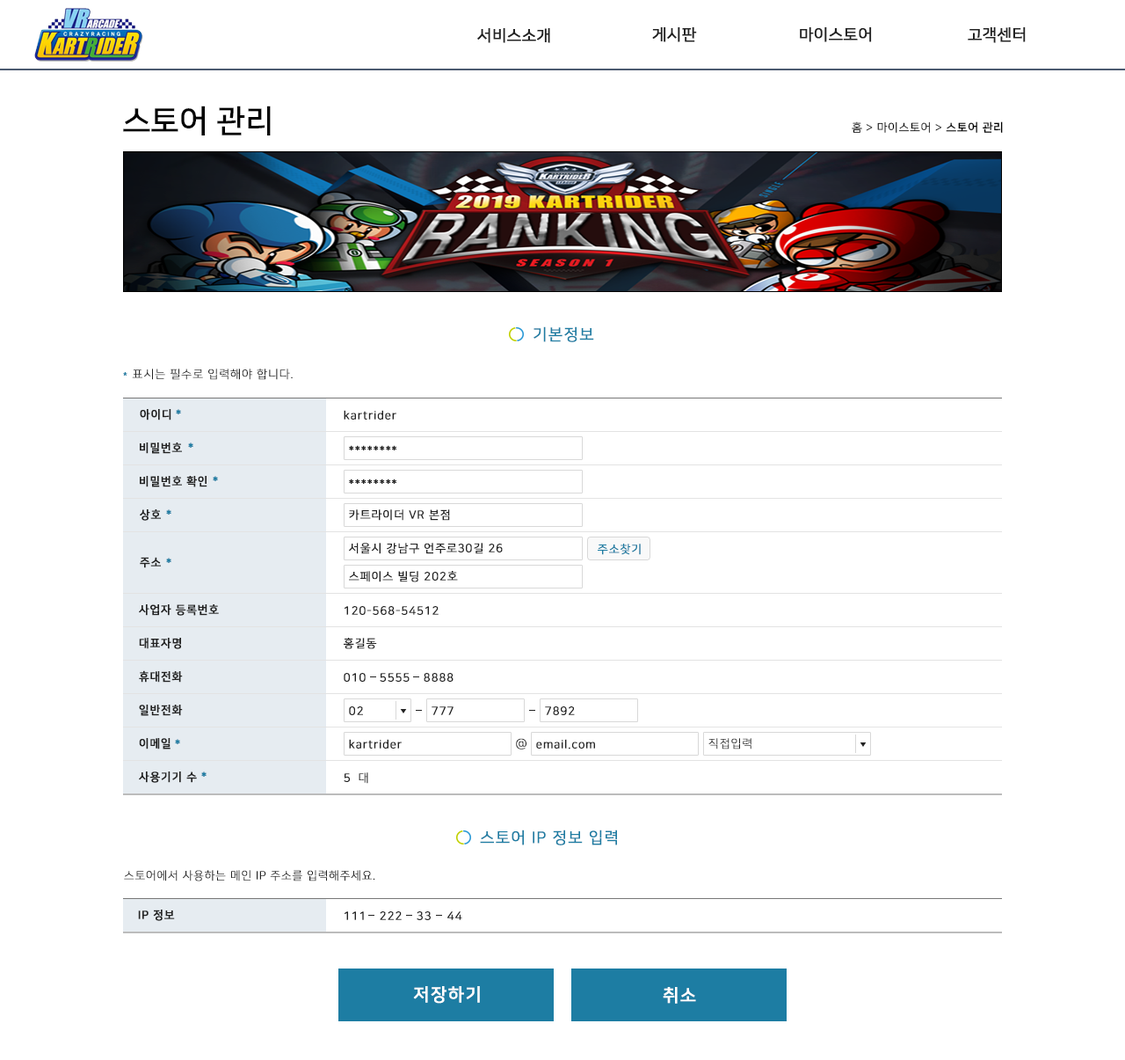
<style>
.page{position:relative;width:1125px;height:1060px;background:#ffffff}
.page>*{position:absolute;margin:0}
.t1{font:15.8px "NanumSquareR";color:#222222;font-weight:bold}
.t2{font:31.7px "NanumSquareB";color:#000000}
.t3{font:11.4px "NanumSquareR";letter-spacing:0.05em;color:#000000}
.t4{font:11.4px "NanumSquareB";letter-spacing:0.05em;color:#000000}
.t5{font:15.8px "NanumSquareR";letter-spacing:0.05em;color:#1d7da3;text-transform:uppercase;font-weight:bold}
.t6{font:11.4px "NotoSansCJKkr-Light";letter-spacing:0.05em;color:#1d7da3;text-transform:uppercase;font-weight:bold}
.t7{font:11.4px "NanumSquareL";letter-spacing:0.05em;color:#222222;text-transform:uppercase;font-weight:bold}
.t8{font:11.4px "NanumSquareB";letter-spacing:0.05em;color:#222222;text-transform:uppercase;font-weight:bold}
.t9{font:11.7px "NanumSquareB";letter-spacing:0.05em;color:#1d7da3;text-transform:uppercase;font-weight:bold}
.t10{font:11.4px "NanumSquareR";letter-spacing:0.05em;color:#222222;font-weight:bold}
.t11{font:11.4px "NanumSquareR";letter-spacing:0.05em;color:#1d7da3;text-transform:uppercase;font-weight:bold}
.t12{font:11.4px "NanumSquareR";letter-spacing:0.05em;color:#222222;text-transform:uppercase;font-weight:bold}
.t13{font:11.4px "NanumSquareL";letter-spacing:0.05em;text-transform:uppercase;font-weight:bold}
.t14{font:17.6px "NanumSquareB";letter-spacing:0.05em;color:#ffffff;font-weight:bold}
</style>
<div class="page">
<p class="t1" style="left:477px;top:27px;width:73px;height:16px">서비스소개</p>
<p class="t1" style="left:652px;top:26px;width:45px;height:16px">게시판</p>
<p class="t1" style="left:800px;top:26px;width:72px;height:16px">마이스토어</p>
<p class="t1" style="left:968px;top:26px;width:58px;height:16px">고객센터</p>
<p class="t2" style="left:123px;top:106px;width:148px;height:29px">스토어 관리</p>
<p class="t3" style="left:852px;top:121px;width:151px;height:12px">홈 &gt; 마이스토어 &gt; <span class="t4">스토어 관리</span></p>
<p class="t5" style="left:534px;top:326px;width:60px;height:16px">기본정보</p>
<p class="t6" style="left:123px;top:372px;width:4px;height:3px">*</p>
<p class="t7" style="left:132px;top:368px;width:161px;height:12px">표시는 필수로 입력해야 합니다.</p>
<p class="t8" style="left:140px;top:409px;width:31px;height:11px">아이디</p>
<p class="t9" style="left:176px;top:409px;width:5px;height:5px">*</p>
<p class="t10" style="left:344px;top:410px;width:53px;height:9px">kartrider</p>
<p class="t8" style="left:140px;top:442px;width:42px;height:12px">비밀번호</p>
<p class="t9" style="left:188px;top:442px;width:5px;height:6px">*</p>
<p class="t10" style="left:349px;top:445px;width:48px;height:5px">********</p>
<p class="t8" style="left:140px;top:476px;width:68px;height:11px">비밀번호 확인</p>
<p class="t9" style="left:213px;top:476px;width:5px;height:5px">*</p>
<p class="t10" style="left:349px;top:478px;width:48px;height:6px">********</p>
<p class="t8" style="left:140px;top:509px;width:21px;height:12px">상호</p>
<p class="t9" style="left:166px;top:509px;width:5px;height:5px">*</p>
<p class="t10" style="left:349px;top:509px;width:101px;height:12px">카트라이더 VR 본점</p>
<p class="t10" style="left:349px;top:543px;width:154px;height:11px">서울시 강남구 언주로30길 26</p>
<p class="t11" style="left:598px;top:543px;width:43px;height:12px">주소찾기</p>
<p class="t8" style="left:140px;top:557px;width:21px;height:11px">주소</p>
<p class="t9" style="left:166px;top:557px;width:5px;height:6px">*</p>
<p class="t10" style="left:349px;top:571px;width:109px;height:11px">스페이스 빌딩 202호</p>
<p class="t8" style="left:139px;top:604px;width:80px;height:11px">사업자 등록번호</p>
<p class="t10" style="left:345px;top:606px;width:94px;height:9px">120-568-54512</p>
<p class="t8" style="left:139px;top:637px;width:42px;height:12px">대표자명</p>
<p class="t10" style="left:344px;top:637px;width:33px;height:12px">홍길동</p>
<p class="t8" style="left:139px;top:670px;width:44px;height:12px">휴대전화</p>
<p class="t12" style="left:344px;top:673px;width:22px;height:8px">010</p>
<p class="t12" style="left:380px;top:673px;width:30px;height:8px">5555</p>
<p class="t12" style="left:424px;top:673px;width:30px;height:8px">8888</p>
<p class="t8" style="left:139px;top:704px;width:44px;height:12px">일반전화</p>
<p class="t12" style="left:349px;top:706px;width:14px;height:9px">02</p>
<p class="t12" style="left:432px;top:706px;width:22px;height:9px">777</p>
<p class="t12" style="left:545px;top:706px;width:30px;height:9px">7892</p>
<p class="t8" style="left:139px;top:738px;width:32px;height:11px">이메일</p>
<p class="t7" style="left:516px;top:738px;width:11px;height:11px">@</p>
<p class="t7" style="left:709px;top:738px;width:43px;height:11px">직접입력</p>
<p class="t9" style="left:175px;top:739px;width:5px;height:5px">*</p>
<p class="t10" style="left:349px;top:739px;width:53px;height:9px">kartrider</p>
<p class="t10" style="left:536px;top:739px;width:59px;height:10px">email.com</p>
<p class="t8" style="left:139px;top:771px;width:58px;height:12px">사용기기 수</p>
<p class="t9" style="left:201px;top:771px;width:6px;height:5px">*</p>
<p class="t10" style="left:344px;top:773px;width:6px;height:9px">5</p>
<p class="t13" style="left:359px;top:772px;width:9px;height:11px">대</p>
<p class="t5" style="left:480px;top:829px;width:137px;height:16px">스토어 IP 정보 입력</p>
<p class="t7" style="left:124px;top:870px;width:251px;height:11px">스토어에서 사용하는 메인 IP 주소를 입력해주세요.</p>
<p class="t8" style="left:138px;top:909px;width:37px;height:12px">IP 정보</p>
<p class="t12" style="left:345px;top:911px;width:19px;height:9px">111</p>
<p class="t12" style="left:380px;top:911px;width:22px;height:9px">222</p>
<p class="t12" style="left:417px;top:911px;width:14px;height:9px">33</p>
<p class="t12" style="left:448px;top:911px;width:14px;height:9px">44</p>
<p class="t14" style="left:413px;top:986px;width:67px;height:17px">저장하기</p>
<p class="t14" style="left:663px;top:987px;width:33px;height:16px">취소</p>
</div>
